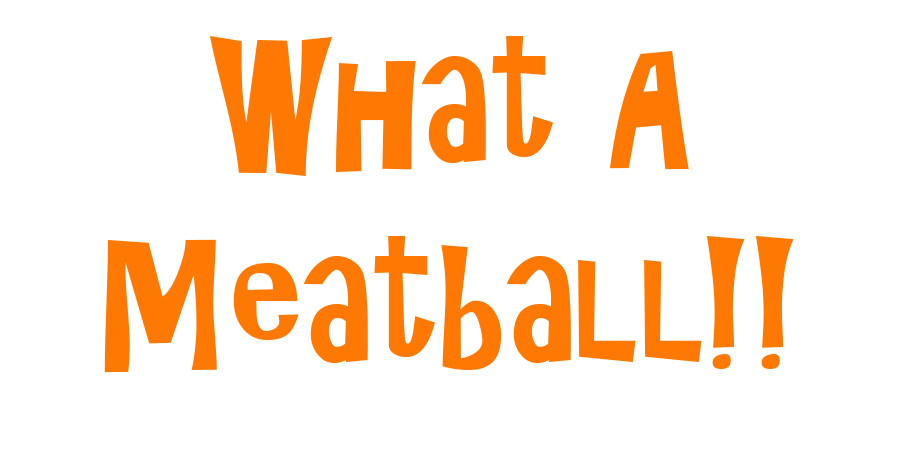
<style>
.page{position:relative;width:914px;height:469px;background:#ffffff}
.page>*{position:absolute;margin:0}
.t1{font:166.7px "ARCHRISTY";color:#fd7903}
</style>
<div class="page">
<p class="t1" style="left:104px;top:36px;width:690px;height:336px;text-align:center">What A<br>Meatball!!</p>
</div>
